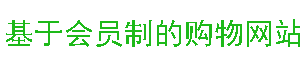
<style>
.page{position:relative;width:300px;height:60px;background:#ffffff}
.page>*{position:absolute;margin:0}
.t1{font:30px "SimHei";color:#1db919}
</style>
<div class="page">
<p class="t1" style="left:6px;top:19px;width:296px;height:28px">基于会员制的购物网站</p>
</div>
